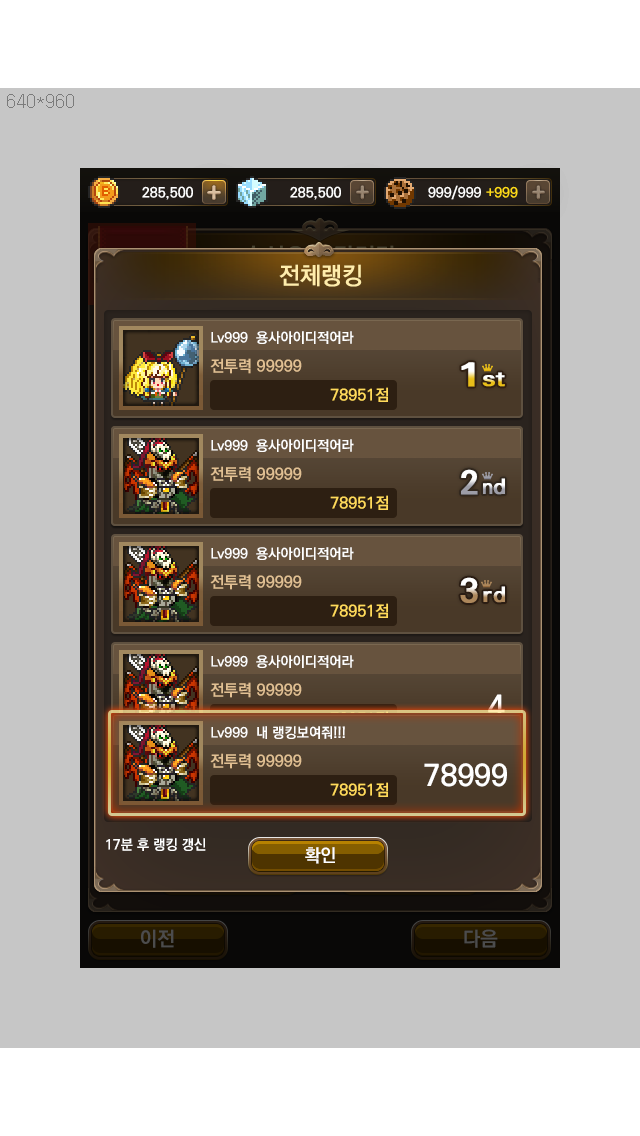
<style>
.page{position:relative;width:640px;height:1136px;background:#c6c6c6}
.page>*{position:absolute;margin:0}
.t1{font:24px "KoPubDotumBold";color:#ffedab}
.t2{font:14px "KoPubDotumBold";color:#ffffff}
.t3{font:16px "KoPubDotumBold";color:#e1c093}
.t4{font:16px "KoPubDotumBold";color:#ffda5b}
.t5{font:30px "KoPubDotumBold"}
.t6{font:30px "KoPubDotumBold";color:#ffffff}
.t7{font:18px "KoPubDotumBold";color:#ffffff}
</style>
<div class="page">
<p class="t1" style="left:279px;top:264px;width:83px;height:23px">전체랭킹</p>
<p class="t2" style="left:211px;top:331px;width:143px;height:13px">Lv999  용사아이디적어라</p>
<p class="t3" style="left:210px;top:358px;width:92px;height:16px">전투력 99999</p>
<p class="t4" style="left:330px;top:387px;width:58px;height:15px">78951점</p>
<p class="t2" style="left:211px;top:439px;width:143px;height:13px">Lv999  용사아이디적어라</p>
<p class="t2" style="left:211px;top:439px;width:143px;height:13px">Lv999  용사아이디적어라</p>
<p class="t3" style="left:210px;top:466px;width:92px;height:16px">전투력 99999</p>
<p class="t3" style="left:210px;top:466px;width:92px;height:16px">전투력 99999</p>
<p class="t4" style="left:330px;top:495px;width:58px;height:15px">78951점</p>
<p class="t4" style="left:330px;top:495px;width:58px;height:15px">78951점</p>
<p class="t2" style="left:211px;top:547px;width:143px;height:13px">Lv999  용사아이디적어라</p>
<p class="t3" style="left:210px;top:574px;width:92px;height:16px">전투력 99999</p>
<p class="t4" style="left:330px;top:603px;width:58px;height:15px">78951점</p>
<p class="t5" style="left:488px;top:694px;width:17px;height:23px">4</p>
<p class="t2" style="left:211px;top:726px;width:134px;height:13px">Lv999  내 랭킹보여줘!!!</p>
<p class="t3" style="left:210px;top:753px;width:92px;height:16px">전투력 99999</p>
<p class="t6" style="left:424px;top:763px;width:83px;height:24px">78999</p>
<p class="t4" style="left:330px;top:782px;width:58px;height:15px">78951점</p>
<p class="t2" style="left:106px;top:838px;width:100px;height:13px">17분 후 랭킹 갱신</p>
<p class="t7" style="left:305px;top:847px;width:30px;height:17px">확인</p>
</div>
